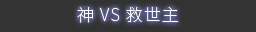
<style>
.page{position:relative;width:256px;height:32px;background:#333333}
.page>*{position:absolute;margin:0}
.t1{font:17px "NotoSansSC-Thin";letter-spacing:0.06em;color:#ffffff}
</style>
<div class="page">
<p class="t1" style="left:77px;top:6px;width:101px;height:17px">神 VS 救世主</p>
</div>
